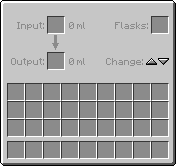
<style>
.page{position:relative;width:176px;height:166px;background:#c6c6c6}
.page>*{position:absolute;margin:0}
.t1{font:8px "Minecraftia-Regular";color:#8b8b8b}
</style>
<div class="page">
<p class="t1" style="left:17px;top:22px;width:27px;height:8px">Input:</p>
<p class="t1" style="left:69px;top:22px;width:16px;height:7px">0 ml</p>
<p class="t1" style="left:115px;top:22px;width:33px;height:7px">Flasks:</p>
<p class="t1" style="left:11px;top:58px;width:33px;height:8px">Output:</p>
<p class="t1" style="left:69px;top:58px;width:16px;height:7px">0 ml</p>
<p class="t1" style="left:106px;top:58px;width:37px;height:8px">Change:</p>
</div>
